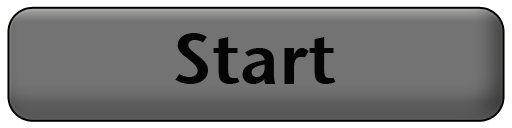
<style>
.page{position:relative;width:512px;height:128px;background:#737373}
.page>*{position:absolute;margin:0}
.t1{font:72px "StoneSansSemOSITCTTSemi";color:#050505}
</style>
<div class="page">
<p class="t1" style="left:175px;top:33px;width:161px;height:51px">Start</p>
</div>
